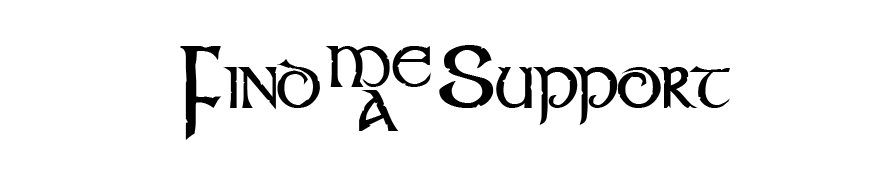
<style>
.page{position:relative;width:883px;height:182px;background:#ffffff}
.page>*{position:absolute;margin:0}
.t1{font:49.3px "Stonecross";color:#000000}
.t2{font:76.6px "Stonecross";color:#000000}
.t3{font:49.3px/43.8px "Stonecross";color:#000000}
</style>
<div class="page">
<p class="t1" style="left:180px;top:45px;width:550px;height:95px"><span class="t2">F</span>IND       <span class="t2">S</span>UPPORT</p>
<p class="t3" style="left:325px;top:46px;width:106px;height:85px;text-align:center">ME<br>A</p>
</div>
